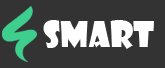
<style>
.page{position:relative;width:165px;height:68px;background:#333333}
.page>*{position:absolute;margin:0}
.t1{font:34px "ShowcardGothic-Reg";color:#ffffff}
</style>
<div class="page">
<p class="t1" style="left:43px;top:20px;width:111px;height:29px">Smart</p>
</div>
